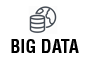
<style>
.page{position:relative;width:86px;height:62px;background:#ffffff}
.page>*{position:absolute;margin:0}
.t1{font:18px "Helvetica-Condensed-Bold";color:#000000}
</style>
<div class="page">
<p class="t1" style="left:11px;top:39px;width:68px;height:14px">BIG DATA</p>
</div>
